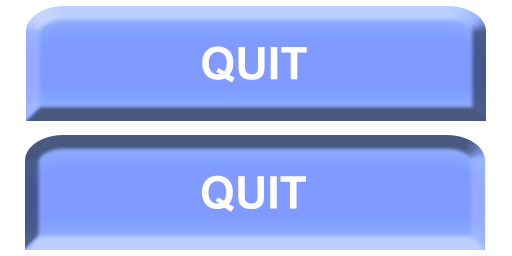
<style>
.page{position:relative;width:512px;height:256px;background:#809aff}
.page>*{position:absolute;margin:0}
.t1{font:45px "Arial-BoldMT";color:#fffefe}
.t2{font:45px "Arial-BoldMT";color:#ffffff}
</style>
<div class="page">
<p class="t1" style="left:202px;top:46px;width:105px;height:37px">QUIT</p>
<p class="t2" style="left:202px;top:175px;width:104px;height:37px">QUIT</p>
</div>
